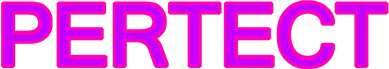
<style>
.page{position:relative;width:389px;height:69px;background:#ffffff}
.page>*{position:absolute;margin:0}
.t1{font:83.9px "MicrosoftSansSerif";color:#c400ff}
</style>
<div class="page">
<p class="t1" style="left:4px;top:4px;width:381px;height:62px">PERTECT</p>
</div>
